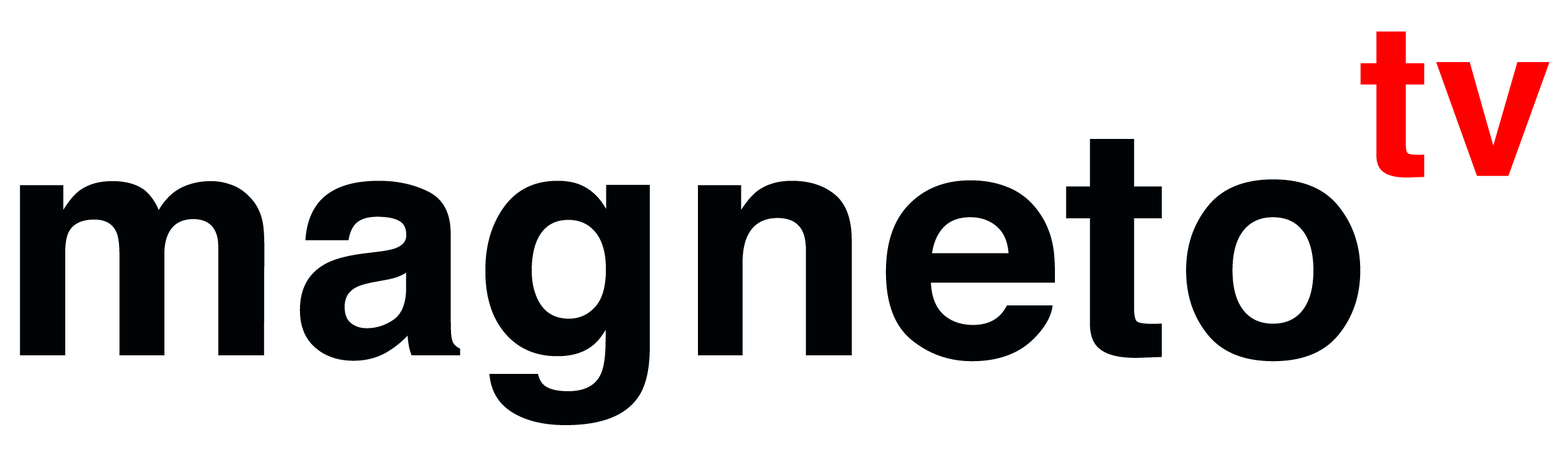
<style>
.page{position:relative;width:1568px;height:452px;background:#ffffff}
.page>*{position:absolute;margin:0}
.t1{font:213.2px "Helvetica-Bold";letter-spacing:0.02em;color:#ff0000}
.t2{font:319.9px "Helvetica-Bold";letter-spacing:0.02em;color:#000305}
</style>
<div class="page">
<p class="t1" style="left:1360px;top:31px;width:189px;height:147px">tv</p>
<p class="t2" style="left:20px;top:139px;width:1341px;height:286px">magneto</p>
</div>
